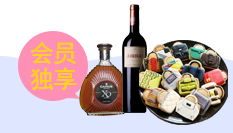
<style>
.page{position:relative;width:233px;height:133px;background:#ffffff}
.page>*{position:absolute;margin:0}
.t1{font:24px/26px "SimHei";letter-spacing:-0.04em;color:#fed700}
</style>
<div class="page">
<p class="t1" style="left:30px;top:41px;width:47px;height:50px">会员<br>独享</p>
</div>
